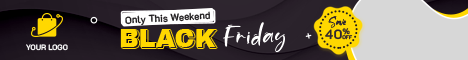
<style>
.page{position:relative;width:468px;height:60px;background:#d7d7d7}
.page>*{position:absolute;margin:0}
.t1{font:10px "K2D-SemiBold";color:#1d1a1c}
.t2{font:13.4px "Sand-Beach";color:#2f2730}
.t3{font:25.4px "ArchivoBlack-Regular";color:#ffd800}
.t4{font:31.2px "Sand-Beach";letter-spacing:0.055em;color:#ffffff}
.t5{font:13.4px "K2D-Bold";color:#2f2730}
.t6{font:5.4px "K2D-Bold";color:#2f2730}
.t7{font:7.8px "K2D-Bold";color:#ffffff}
</style>
<div class="page">
<p class="t1" style="left:125px;top:11px;width:85px;height:15px;rotate:-3deg">Only This Weekend</p>
<p class="t2" style="left:328px;top:16px;width:19px;height:12px">Save</p>
<p class="t3" style="left:120px;top:29px;width:96px;height:18px">BLACK</p>
<p class="t3" style="left:122px;top:30px;width:95px;height:18px">BLACK</p>
<p class="t4" style="left:223px;top:22px;width:62px;height:31px">Friday</p>
<p class="t5" style="left:325px;top:28px;width:25px;height:12px">40%</p>
<p class="t6" style="left:342px;top:35px;width:11px;height:5px">OFF</p>
<p class="t7" style="left:26px;top:44px;width:42px;height:7px">YOUR LOGO</p>
</div>
